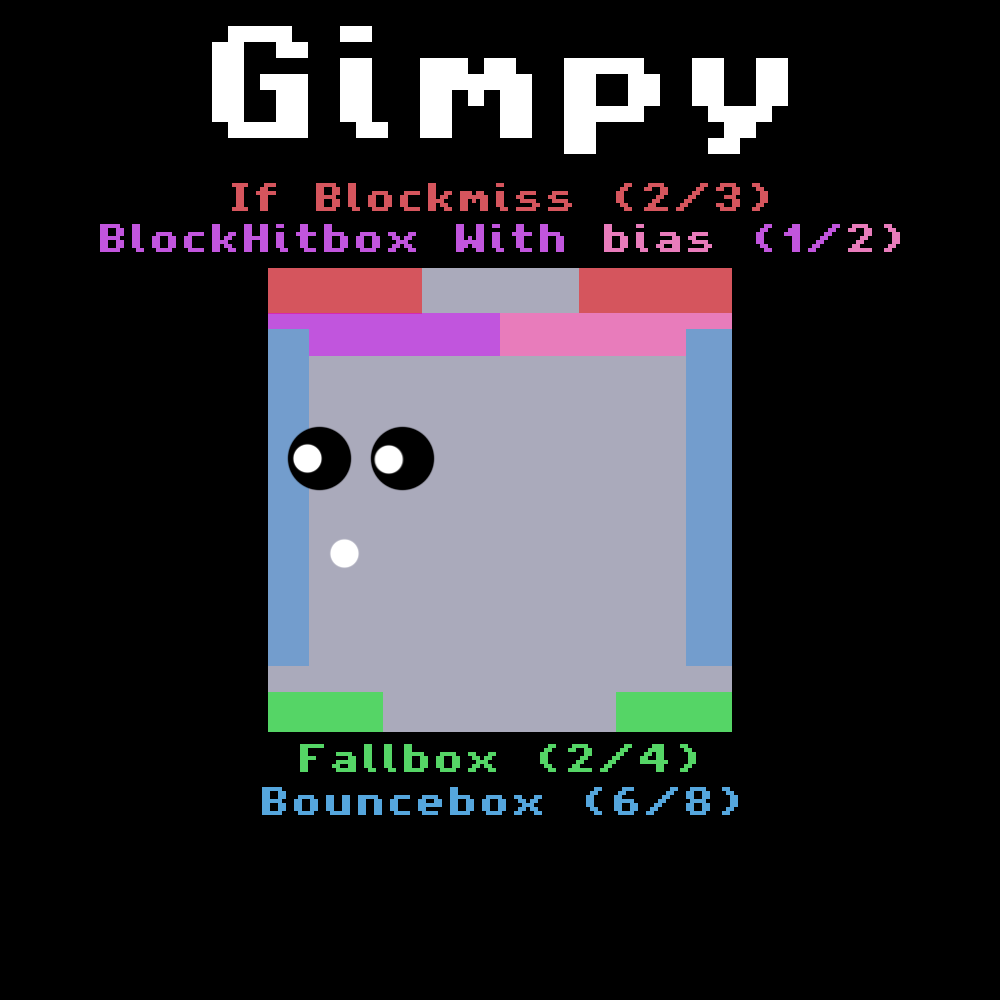
<style>
.page{position:relative;width:1000px;height:1000px;background:#000000}
.page>*{position:absolute;margin:0}
.t1{font:128px "AmigaForeverPro";color:#ffffff}
.t2{font:32px "AmigaForeverPro";color:#d5555d}
.t3{font:32px "AmigaForeverPro";color:#c155dd}
.t4{font:32px "AmigaForeverPro";color:#e87cbb}
.t5{font:32px "AmigaForeverPro";color:#55d566}
.t6{font:32px "AmigaForeverPro";color:#55a6dd}
</style>
<div class="page">
<p class="t1" style="left:212px;top:26px;width:576px;height:128px">Gimpy</p>
<p class="t2" style="left:232px;top:183px;width:536px;height:28px">If Blockmiss (2/3)</p>
<p class="t3" style="left:100px;top:224px;width:800px;height:28px">BlockHitbox With <span class="t4">bias </span>(1/<span class="t4">2)</span></p>
<p class="t5" style="left:300px;top:744px;width:396px;height:28px">Fallbox (2/4)</p>
<p class="t6" style="left:262px;top:787px;width:476px;height:28px">Bouncebox (6/8)</p>
</div>
